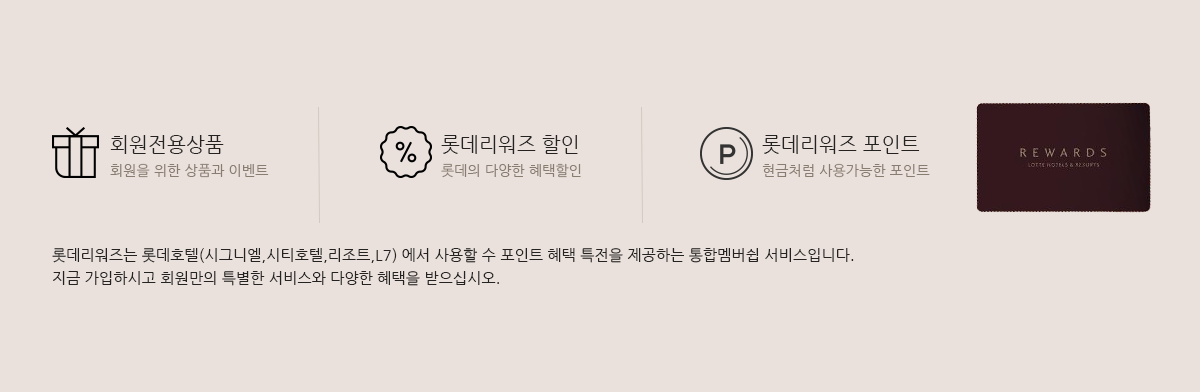
<style>
.page{position:relative;width:1200px;height:392px;background:#eae1dc}
.page>*{position:absolute;margin:0}
.t1{font:14px/12px "NanumGothic";letter-spacing:0.01em;color:#897d71}
.t2{font:20px/12px "NanumGothic";letter-spacing:0.01em;color:#242321}
.t3{font:15px/23px "NanumGothic";letter-spacing:0.01em;color:#242321}
</style>
<div class="page">
<p class="t1" style="left:110px;top:135px;width:159px;height:43px"><span class="t2">회원전용상품<br><br></span>회원을 위한 상품과 이벤트</p>
<p class="t1" style="left:441px;top:135px;width:140px;height:43px"><span class="t2">롯데리워즈 할인<br><br></span>롯데의 다양한 혜택할인</p>
<p class="t1" style="left:762px;top:135px;width:168px;height:43px"><span class="t2">롯데리워즈 포인트<br><br></span>현금처럼 사용가능한 포인트</p>
<p class="t3" style="left:52px;top:248px;width:802px;height:38px">롯데리워즈는 롯데호텔(시그니엘,시티호텔,리조트,L7) 에서 사용할 수 포인트 혜택 특전을 제공하는 통합멤버쉽 서비스입니다.<br>지금 가입하시고 회원만의 특별한 서비스와 다양한 혜택을 받으십시오.</p>
</div>
